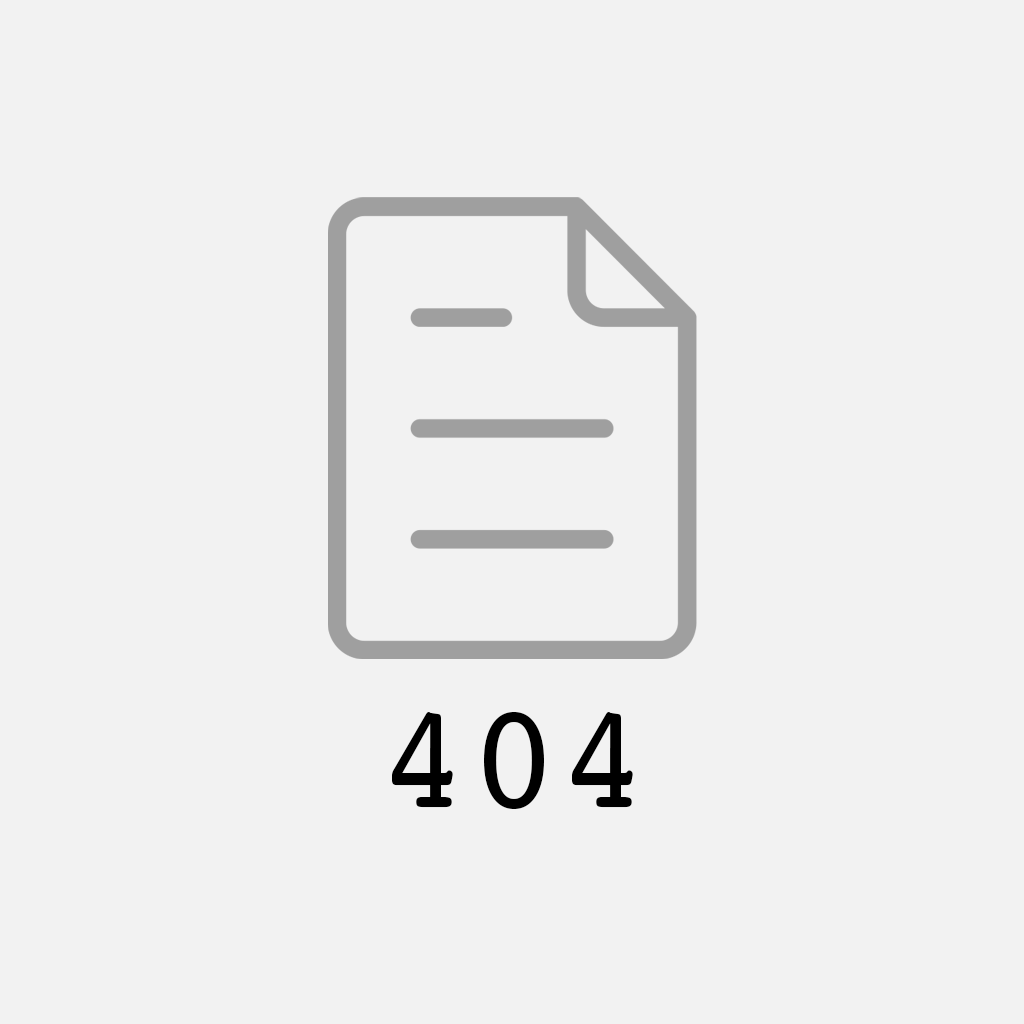
<style>
.page{position:relative;width:1024px;height:1024px;background:#f2f2f2}
.page>*{position:absolute;margin:0}
.t1{font:150px "Courier";color:#000000}
</style>
<div class="page">
<p class="t1" style="left:392px;top:712px;width:241px;height:97px">404</p>
</div>
